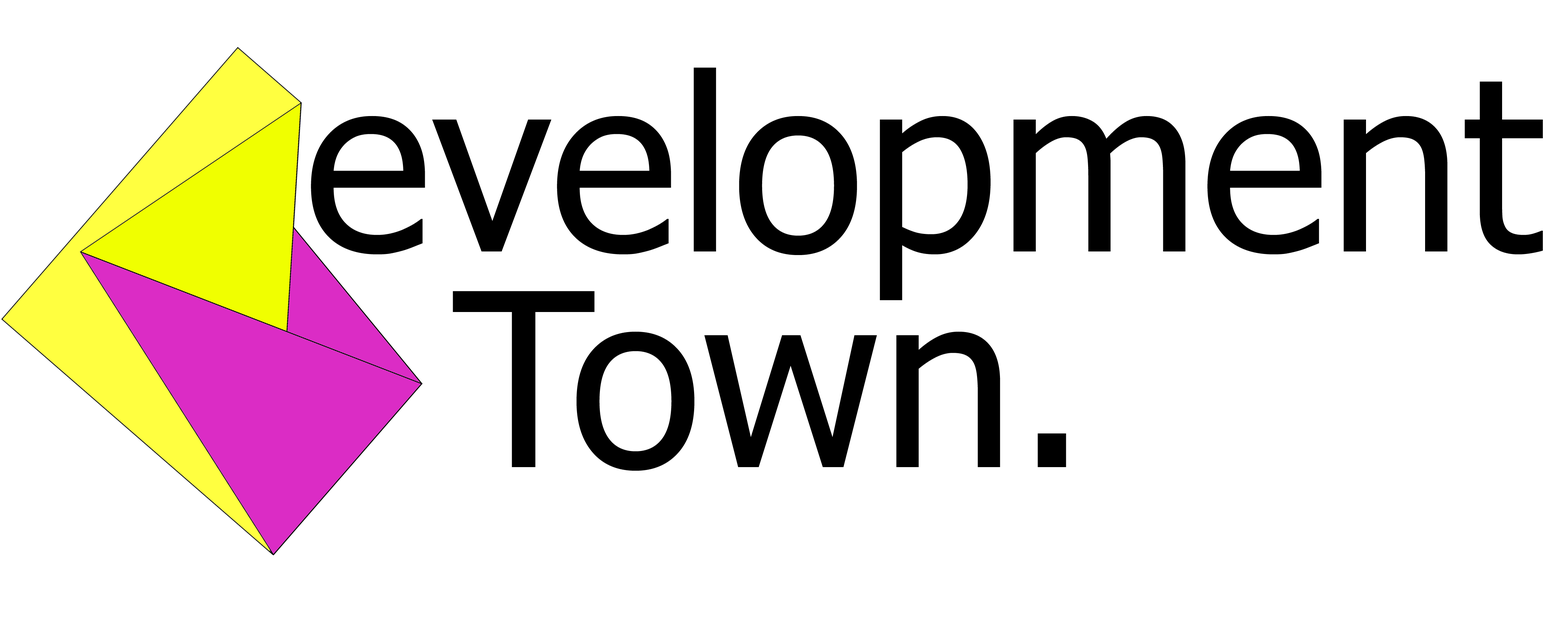
<style>
.page{position:relative;width:1568px;height:619px;background:#ffffff}
.page>*{position:absolute;margin:0}
.t1{font:241.7px "Tahoma";color:#000000}
.t2{font:313.4px "Tahoma";color:#000000}
</style>
<div class="page">
<p class="t1" style="left:311px;top:67px;width:1232px;height:233px">evelopment<span class="t2">Town</span></p>
<p class="t1" style="left:453px;top:291px;width:613px;height:180px">Town.</p>
</div>
